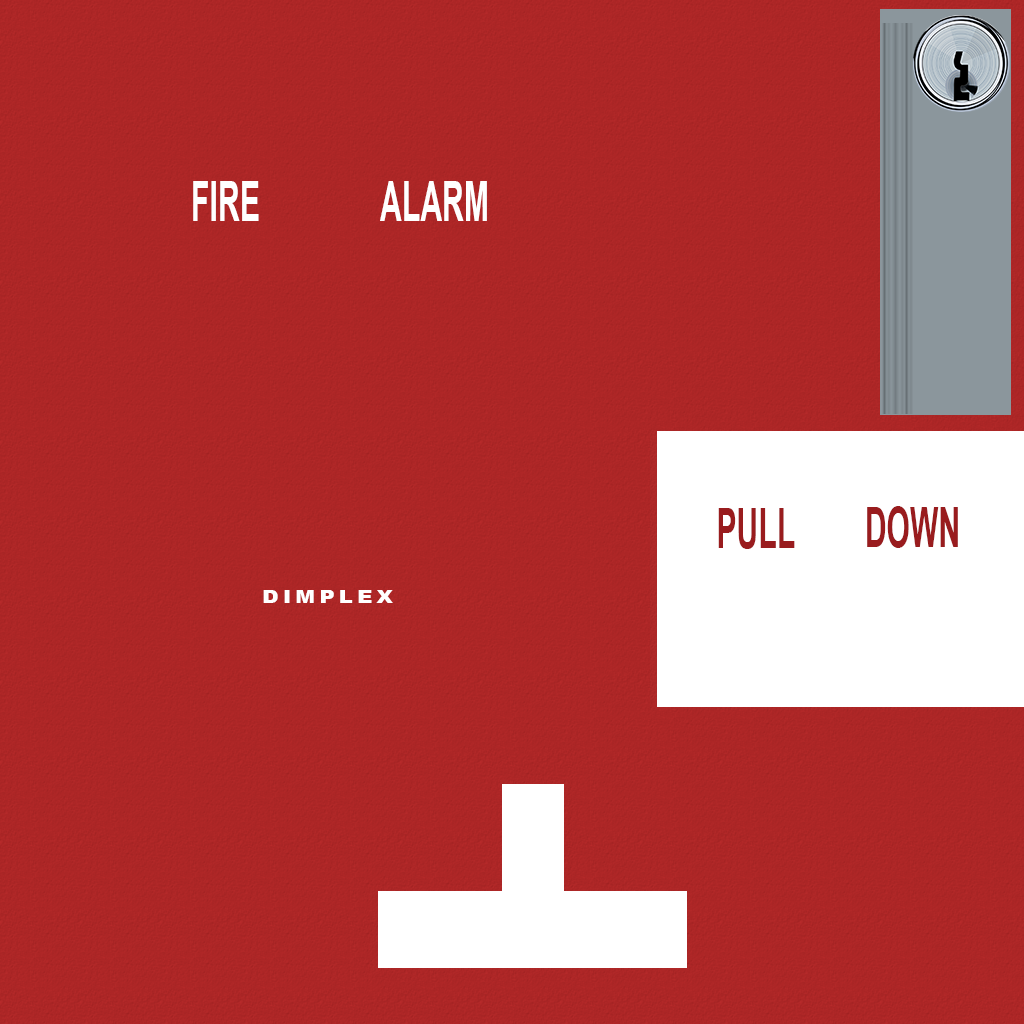
<style>
.page{position:relative;width:1024px;height:1024px;background:#ae2727}
.page>*{position:absolute;margin:0}
.t1{font:55px "Arial-BoldMT";color:#ffffff;scale:0.55 1}
.t2{font:55px "Arial-BoldMT";color:#991c1e;scale:0.55 1}
.t3{font:18px "Arial-Black";letter-spacing:0.2em;color:#ffffff;scale:1.17 1}
</style>
<div class="page">
<p class="t1" style="left:193px;top:181px;width:66px;height:40px">FIRE</p>
<p class="t1" style="left:380px;top:181px;width:107px;height:40px">ALARM</p>
<p class="t2" style="left:718px;top:508px;width:77px;height:41px">PULL</p>
<p class="t2" style="left:867px;top:506px;width:91px;height:42px">DOWN</p>
<p class="t3" style="left:263px;top:590px;width:130px;height:13px">DIMPLEX</p>
</div>
